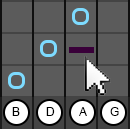
<style>
.page{position:relative;width:130px;height:129px;background:#5b5b5b}
.page>*{position:absolute;margin:0}
.t1{font:12px "ArialMT";color:#000000}
</style>
<div class="page">
<p class="t1" style="left:12px;top:107px;width:8px;height:9px">B</p>
<p class="t1" style="left:46px;top:107px;width:9px;height:9px">D</p>
<p class="t1" style="left:79px;top:107px;width:8px;height:9px">A</p>
<p class="t1" style="left:110px;top:107px;width:9px;height:9px">G</p>
</div>
